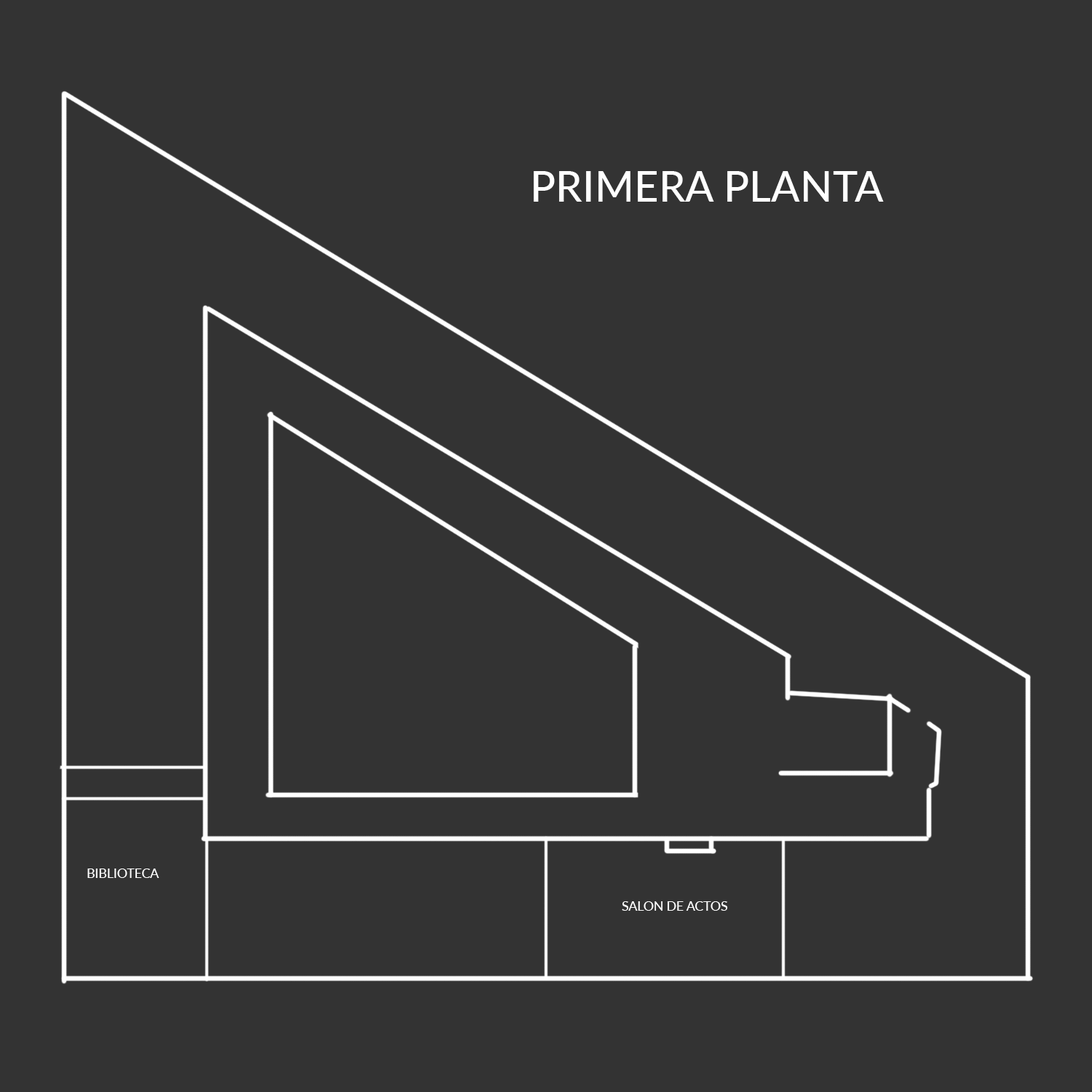
<style>
.page{position:relative;width:1092px;height:1092px;background:#333333}
.page>*{position:absolute;margin:0}
.t1{font:42.5px "Lato-Medium";color:#ffffff}
.t2{font:12.7px "Lato-Medium";color:#ffffff}
</style>
<div class="page">
<p class="t1" style="left:534px;top:171px;width:350px;height:31px">PRIMERA PLANTA</p>
<p class="t2" style="left:87px;top:868px;width:72px;height:10px">BIBLIOTECA</p>
<p class="t2" style="left:622px;top:901px;width:106px;height:10px">SALON DE ACTOS</p>
</div>
